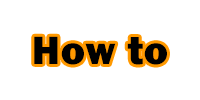
<style>
.page{position:relative;width:200px;height:100px;background:#ffffff}
.page>*{position:absolute;margin:0}
.t1{font:40.6px "FranklinGothic-Heavy";letter-spacing:0.025em;color:#ff8400}
</style>
<div class="page">
<p class="t1" style="left:34px;top:36px;width:133px;height:29px">How to</p>
</div>
